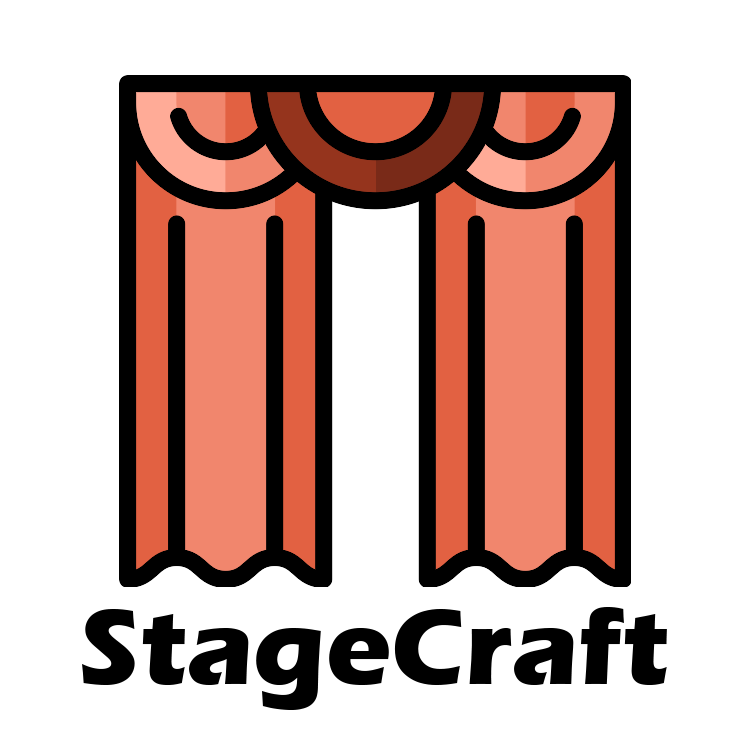
<style>
.page{position:relative;width:750px;height:750px;background:#ffffff}
.page>*{position:absolute;margin:0}
.t1{font:110px "ErasITC-Bold";color:#000000}
</style>
<div class="page">
<p class="t1" style="left:82px;top:607px;width:585px;height:103px">StageCraft</p>
</div>
